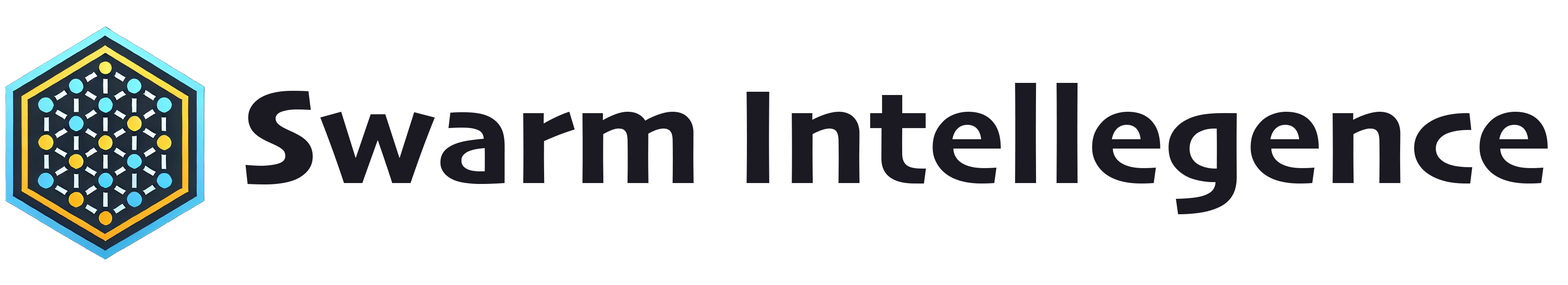
<style>
.page{position:relative;width:1568px;height:285px;background:#ffffff}
.page>*{position:absolute;margin:0}
.t1{font:139.9px "Skia-Bold";color:#1b1a23}
</style>
<div class="page">
<p class="t1" style="left:245px;top:83px;width:1303px;height:132px">Swarm Intellegence</p>
</div>
